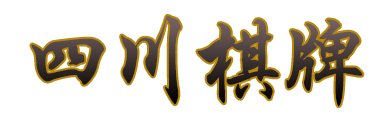
<style>
.page{position:relative;width:378px;height:128px;background:#ffffff}
.page>*{position:absolute;margin:0}
.t1{font:100px "STXingkai";letter-spacing:-0.14em}
</style>
<div class="page">
<p class="t1" style="left:31px;top:16px;width:332px;height:91px">四川棋牌</p>
</div>
